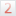
<style>
.page{position:relative;width:16px;height:16px;background:#e1e5e7}
.page>*{position:absolute;margin:0}
.t1{font:13.8px "Tahoma";font-weight:bold}
</style>
<div class="page">
<p class="t1" style="left:4px;top:2px;width:8px;height:12px">2</p>
</div>
